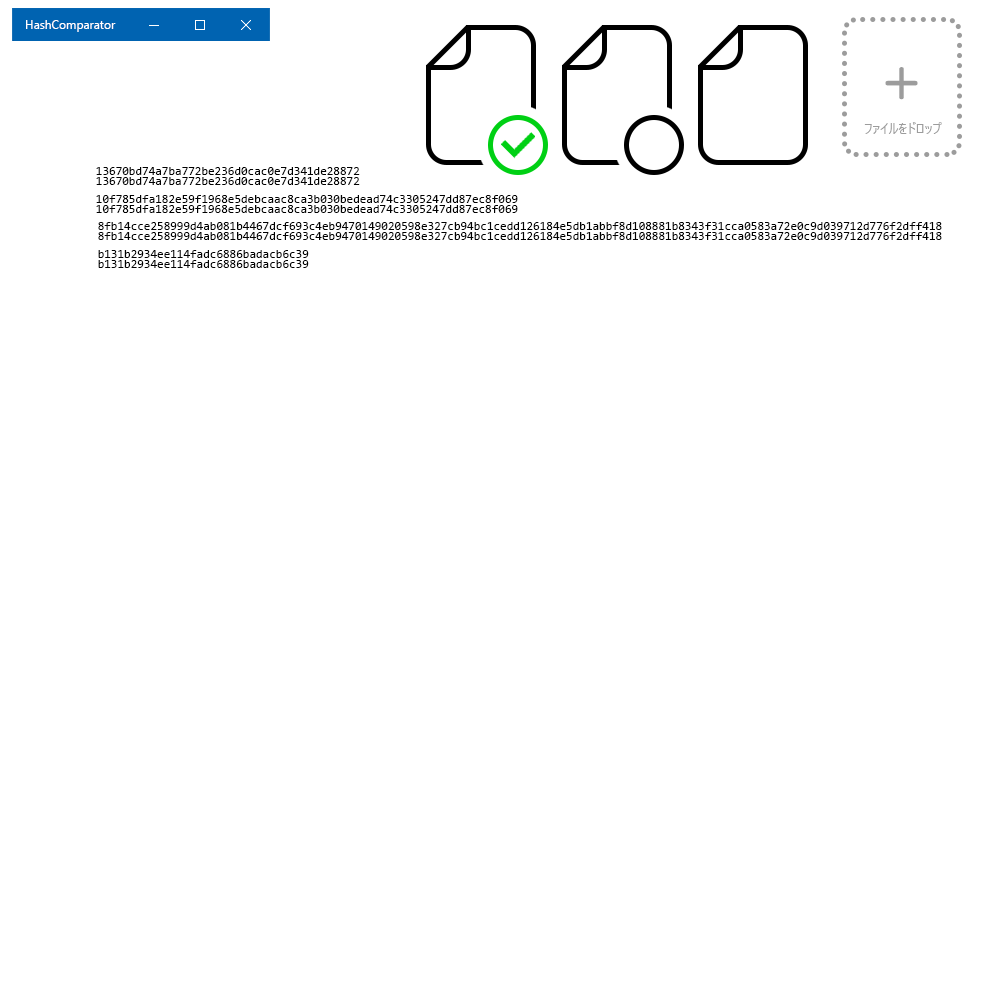
<style>
.page{position:relative;width:1000px;height:1000px;background:#ffffff}
.page>*{position:absolute;margin:0}
.t1{font:12px "YuGothicUI-Regular";color:#ffffff}
.t2{font:47px "UDDigiKyokashoN-B";color:#9c9c9c}
.t3{font:12px "YuGothicUI-Regular";color:#9c9c9c}
.t4{font:12px "Consolas";color:#000000}
</style>
<div class="page">
<p class="t1" style="left:26px;top:20px;width:90px;height:12px">HashComparator</p>
<p class="t2" style="left:885px;top:67px;width:33px;height:33px">＋</p>
<p class="t3" style="left:864px;top:122px;width:78px;height:12px">ファイルをドロップ</p>
<p class="t4" style="left:96px;top:167px;width:264px;height:8px">13670bd74a7ba772be236d0cac0e7d341de28872</p>
<p class="t4" style="left:96px;top:177px;width:264px;height:8px">13670bd74a7ba772be236d0cac0e7d341de28872</p>
<p class="t4" style="left:96px;top:195px;width:422px;height:8px">10f785dfa182e59f1968e5debcaac8ca3b030bedead74c3305247dd87ec8f069</p>
<p class="t4" style="left:96px;top:205px;width:422px;height:8px">10f785dfa182e59f1968e5debcaac8ca3b030bedead74c3305247dd87ec8f069</p>
<p class="t4" style="left:98px;top:222px;width:844px;height:8px">8fb14cce258999d4ab081b4467dcf693c4eb9470149020598e327cb94bc1cedd126184e5db1abbf8d108881b8343f31cca0583a72e0c9d039712d776f2dff418</p>
<p class="t4" style="left:98px;top:232px;width:844px;height:8px">8fb14cce258999d4ab081b4467dcf693c4eb9470149020598e327cb94bc1cedd126184e5db1abbf8d108881b8343f31cca0583a72e0c9d039712d776f2dff418</p>
<p class="t4" style="left:98px;top:250px;width:211px;height:8px">b131b2934ee114fadc6886badacb6c39</p>
<p class="t4" style="left:98px;top:260px;width:211px;height:8px">b131b2934ee114fadc6886badacb6c39</p>
</div>
